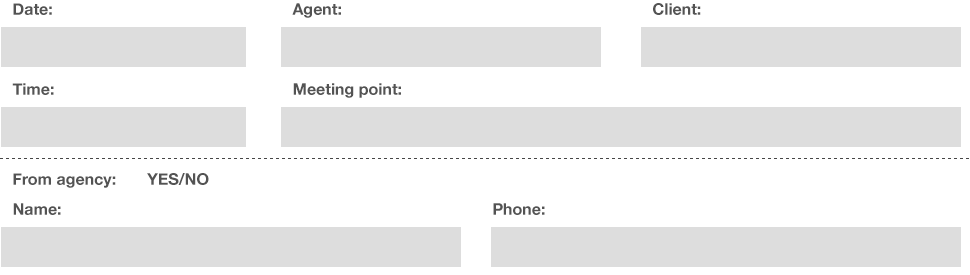
<style>
.page{position:relative;width:970px;height:275px;background:#ffffff}
.page>*{position:absolute;margin:0}
.t1{font:16px "HelveticaNeue-Bold";color:#535353}
</style>
<div class="page">
<p class="t1" style="left:13px;top:3px;width:39px;height:12px">Date:</p>
<p class="t1" style="left:292px;top:3px;width:49px;height:15px">Agent:</p>
<p class="t1" style="left:653px;top:3px;width:48px;height:12px">Client:</p>
<p class="t1" style="left:12px;top:83px;width:42px;height:12px">Time:</p>
<p class="t1" style="left:293px;top:83px;width:108px;height:15px">Meeting point:</p>
<p class="t1" style="left:13px;top:173px;width:196px;height:15px">From agency:       YES/NO</p>
<p class="t1" style="left:13px;top:203px;width:48px;height:12px">Name:</p>
<p class="t1" style="left:493px;top:203px;width:52px;height:12px">Phone:</p>
</div>
